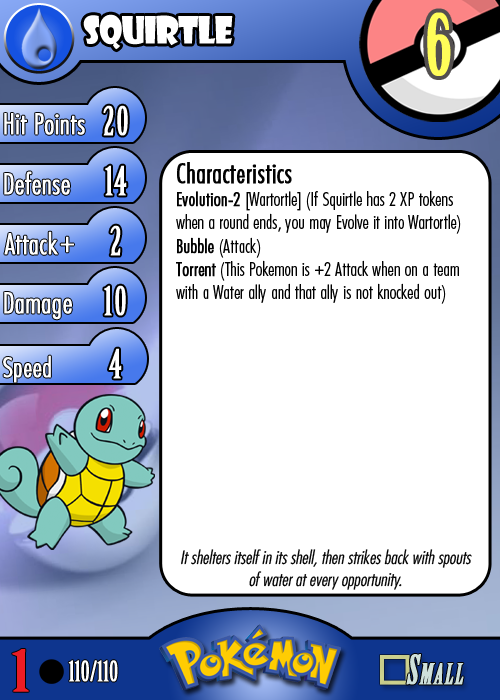
<style>
.page{position:relative;width:500px;height:700px;background:#ffffff}
.page>*{position:absolute;margin:0}
.t1{font:36.7px "ShowcardGothic-Reg";letter-spacing:-0.025em;color:#ffffff;scale:0.91 1}
.t2{font:83.3px "BirchStd";letter-spacing:0.025em;color:#fffd59;font-weight:bold}
.t3{font:27.8px "Futura-CondensedLight";color:#ffffff;font-weight:bold}
.t4{font:38.9px "BirchStd";letter-spacing:0.035em;color:#ffffff;font-weight:bold}
.t5{font:19.4px "FuturaCondensedBQ-Light";color:#010101}
.t6{font:27.8px "FuturaCondensedBQ-Light";color:#010101;font-weight:bold}
.t7{font:19.4px "FuturaCondensedBQ-Light";color:#010101;font-weight:bold}
.t8{font:30.6px "Futura-CondensedLight";color:#ffffff;font-weight:bold}
.t9{font:27.8px "FuturaCondensedBQ-Light";color:#ffffff;font-weight:bold}
.t10{font:18.1px "Futura-CondensedLight";color:#010101;font-style:italic}
.t11{font:55.6px "BirchStd";color:#ed1c24;font-weight:bold;scale:1.5 1}
.t12{font:27.8px "BirchStd";color:#ffffff;font-weight:bold}
</style>
<div class="page">
<p class="t1" style="left:83px;top:14px;width:150px;height:36px">squirtle</p>
<p class="t2" style="left:427px;top:12px;width:24px;height:64px">6</p>
<p class="t3" style="left:4px;top:113px;width:81px;height:22px">Hit Points</p>
<p class="t4" style="left:103px;top:105px;width:25px;height:31px">20</p>
<p class="t3" style="left:4px;top:171px;width:66px;height:24px">Defense</p>
<p class="t4" style="left:105px;top:165px;width:22px;height:31px">14</p>
<p class="t5" style="left:176px;top:162px;width:285px;height:142px"><span class="t6">Characteristics<br></span><span class="t7">Evolution-2 </span>[Wartortle] (If Squirtle has 2 XP tokens when a round ends, you may Evolve it into Wartortle)<br><span class="t7">Bubble</span> (Attack)<br><span class="t7">Torrent</span> (This Pokemon is +2 Attack when on a team with a Water ally and that ally is not knocked out)</p>
<p class="t3" style="left:4px;top:231px;width:54px;height:24px">Attack</p>
<p class="t4" style="left:110px;top:225px;width:11px;height:31px">2</p>
<p class="t8" style="left:60px;top:236px;width:14px;height:17px">+</p>
<p class="t3" style="left:4px;top:292px;width:68px;height:28px">Damage</p>
<p class="t4" style="left:104px;top:285px;width:22px;height:31px">10</p>
<p class="t4" style="left:109px;top:348px;width:13px;height:31px">4</p>
<p class="t9" style="left:3px;top:355px;width:48px;height:28px">Speed</p>
<p class="t10" style="left:181px;top:549px;width:291px;height:41px;text-align:center">It shelters itself in its shell, then strikes back with spouts of water at every opportunity.</p>
<p class="t11" style="left:12px;top:649px;width:17px;height:43px">1</p>
<p class="t12" style="left:68px;top:660px;width:50px;height:22px">110/110</p>
</div>
